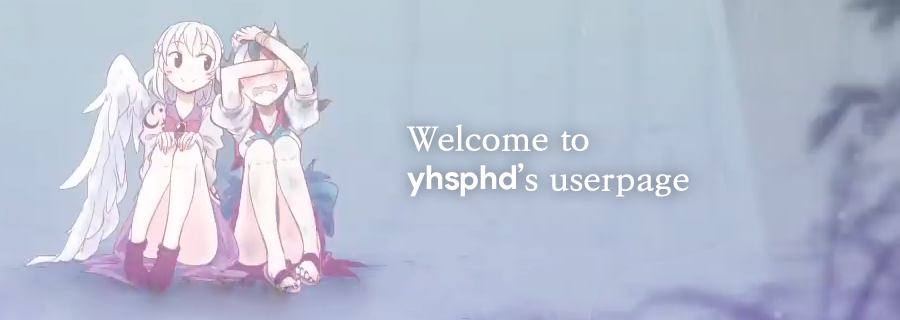
<style>
.page{position:relative;width:900px;height:320px}
.page>*{position:absolute;margin:0}
.t1{font:33px "KoPubWorldBatangBold";color:#ffffff}
.t2{font:33px "ProductSans-Bold";color:#ffffff}
</style>
<div class="page">
<p class="t1" style="left:407px;top:124px;width:282px;height:73px">Welcome to<br><span class="t2">yhsphd</span>’s userpage</p>
</div>
